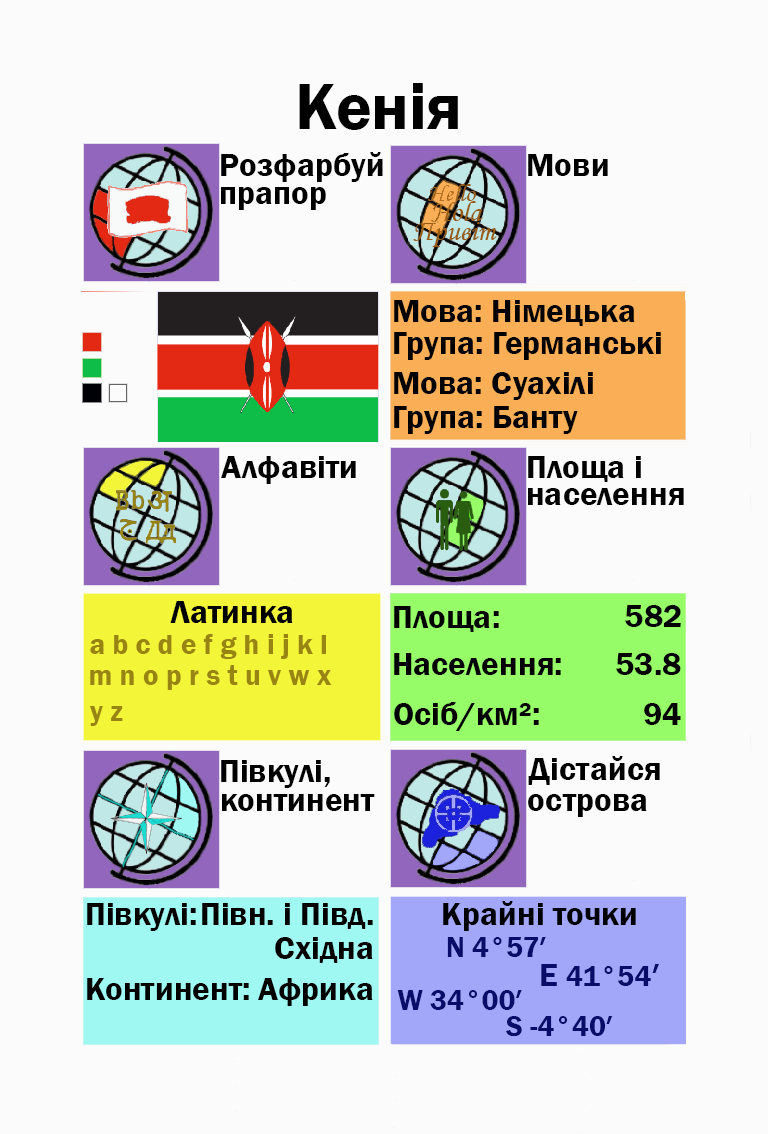
<style>
.page{position:relative;width:768px;height:1134px;background:#fbfbfb}
.page>*{position:absolute;margin:0}
.t1{font:66.7px "FranklinGothic-Demi";color:#000000}
.t2{font:33.3px "FranklinGothic-Demi";color:#000000}
.t3{font:33.3px "FranklinGothic-Demi";color:#000003}
.t4{font:29.2px "FranklinGothic-Demi";color:#988413}
.t5{font:29.2px "FranklinGothic-Demi";color:#090c69}
.t6{font:33.3px "FranklinGothic-Demi";color:#090c69}
</style>
<div class="page">
<p class="t1" style="left:299px;top:83px;width:159px;height:47px">Кенія</p>
<p class="t2" style="left:221px;top:152px;width:162px;height:30px">Розфарбуй</p>
<p class="t2" style="left:528px;top:154px;width:80px;height:22px">Мови</p>
<p class="t2" style="left:221px;top:187px;width:105px;height:23px">прапор</p>
<p class="t2" style="left:394px;top:300px;width:241px;height:26px">Мова: Німецька</p>
<p class="t2" style="left:394px;top:332px;width:267px;height:28px">Група: Германські</p>
<p class="t2" style="left:394px;top:372px;width:199px;height:28px">Мова: Суахілі</p>
<p class="t2" style="left:394px;top:406px;width:184px;height:28px">Група: Банту</p>
<p class="t2" style="left:221px;top:456px;width:135px;height:28px">Алфавіти</p>
<p class="t2" style="left:528px;top:456px;width:113px;height:26px">Площа і</p>
<p class="t2" style="left:528px;top:488px;width:156px;height:17px">населення</p>
<p class="t2" style="left:170px;top:601px;width:123px;height:22px">Латинка</p>
<p class="t2" style="left:394px;top:606px;width:105px;height:26px">Площа:</p>
<p class="t3" style="left:625px;top:605px;width:56px;height:22px">582</p>
<p class="t4" style="left:90px;top:634px;width:236px;height:25px">a b c d e f g h i j k l</p>
<p class="t2" style="left:394px;top:653px;width:167px;height:22px">Населення:</p>
<p class="t2" style="left:616px;top:653px;width:65px;height:22px">53.8</p>
<p class="t4" style="left:90px;top:665px;width:242px;height:25px">m n o p r s t u v w x</p>
<p class="t2" style="left:394px;top:702px;width:145px;height:29px">Осіб/км²:</p>
<p class="t4" style="left:89px;top:706px;width:34px;height:20px">y z</p>
<p class="t2" style="left:644px;top:703px;width:37px;height:22px">94</p>
<p class="t2" style="left:221px;top:760px;width:109px;height:28px">Півкулі,</p>
<p class="t2" style="left:528px;top:756px;width:132px;height:29px">Дістайся</p>
<p class="t2" style="left:222px;top:794px;width:153px;height:17px">континент</p>
<p class="t2" style="left:528px;top:794px;width:119px;height:23px">острова</p>
<p class="t2" style="left:87px;top:903px;width:109px;height:28px">Півкулі:</p>
<p class="t2" style="left:202px;top:903px;width:171px;height:26px">Півн. і Півд.</p>
<p class="t3" style="left:443px;top:901px;width:193px;height:30px">Крайні точки</p>
<p class="t2" style="left:275px;top:937px;width:98px;height:26px">Східна</p>
<p class="t5" style="left:447px;top:937px;width:99px;height:20px">N 4°57′</p>
<p class="t5" style="left:541px;top:964px;width:118px;height:22px"><span class="t6">E </span>41°54<span class="t6">′</span></p>
<p class="t2" style="left:87px;top:978px;width:162px;height:22px">Континент:</p>
<p class="t2" style="left:258px;top:978px;width:115px;height:28px">Африка</p>
<p class="t5" style="left:397px;top:990px;width:125px;height:20px">W 34°00′</p>
<p class="t5" style="left:506px;top:1016px;width:107px;height:21px">S -4°40′</p>
</div>
